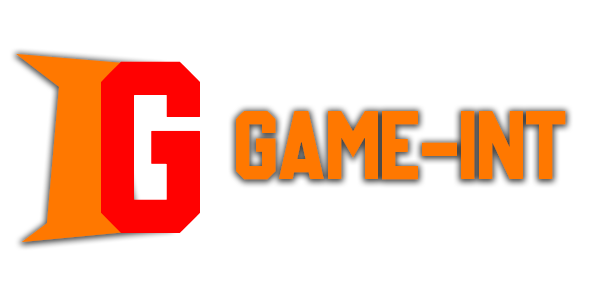
<style>
.page{position:relative;width:600px;height:296px;background:#ffffff}
.page>*{position:absolute;margin:0}
.t1{font:250px "SnapITC-Regular";color:#ff7800}
.t2{font:250px "Basketball";color:#ff0101}
.t3{font:100px "Basketball";color:#ff7800}
</style>
<div class="page">
<p class="t1" style="left:16px;top:54px;width:156px;height:188px">I</p>
<p class="t2" style="left:101px;top:61px;width:99px;height:172px">G</p>
<p class="t3" style="left:236px;top:111px;width:330px;height:69px">GAME-INT</p>
</div>
